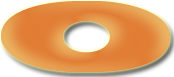
<style>
.page{position:relative;width:174px;height:77px}
.page>*{position:absolute;margin:0}
.t1{font:133.3px "BlackoakStd";color:#e3893f}
.t2{font:242.2px "BlackoakStd";color:#e3893f}
</style>
<div class="page">
<p class="t1" style="left:1px;top:1px;width:169px;height:71px"><span class="t2"> </span>o</p>
</div>
